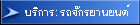
<style>
.page{position:relative;width:140px;height:25px}
.page>*{position:absolute;margin:0}
.t1{font:15.3px "EucrosiaDSE";color:#ffffff;scale:1.12 1}
</style>
<div class="page">
<p class="t1" style="left:25px;top:4px;width:105px;height:12px">ºÃÔ¡ÒÃ:Ã¶¨Ñ¡ÃÂÒ¹Â¹µì</p>
</div>
